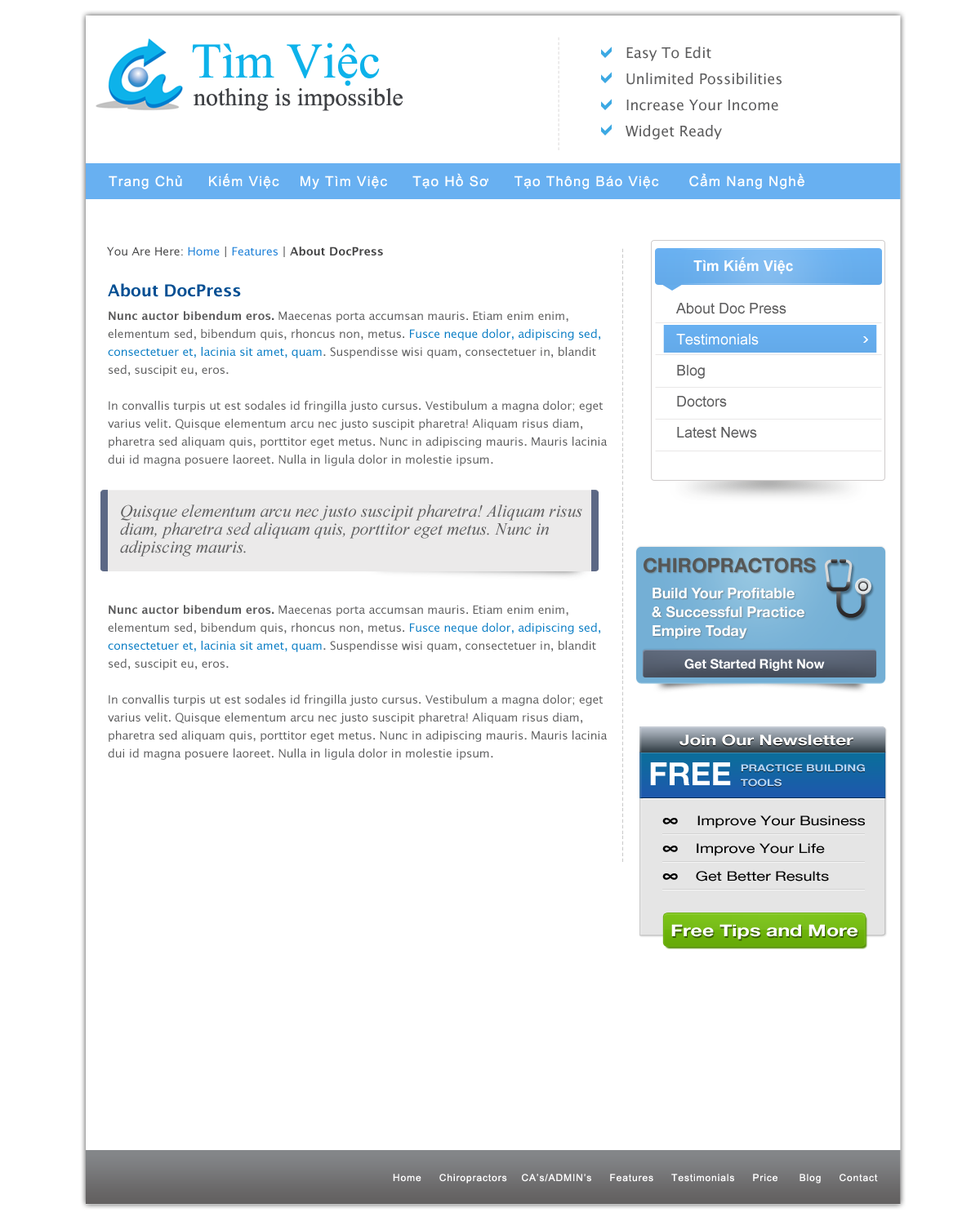
<style>
.page{position:relative;width:980px;height:1217px;background:#ffffff}
.page>*{position:absolute;margin:0}
.t1{font:9.8px "ArialMT";letter-spacing:0.155em;color:#e2e0e0}
.t2{font:49.8px "TimesNewRomanPSMT";color:#0db2ea}
.t3{font:14.7px/26.1px "LucidaGrande";color:#5c5c5d}
.t4{font:24.5px "TimesNewRomanPSMT";color:#3f4145}
.t5{font:13.9px "ArialMT";letter-spacing:0.075em;color:#ffffff}
.t6{font:11.4px "LucidaGrande-Bold";color:#444445}
.t7{font:11.4px "LucidaGrande";color:#444445}
.t8{font:11.4px "LucidaGrande";color:#187dd7}
.t9{font:8.2px "LucidaGrande";letter-spacing:0.1em;color:#b5b5b6}
.t10{font:14.7px "Arial-BoldMT";color:#ffffff}
.t11{font:16.3px "LucidaGrande-Bold";color:#044f93}
.t12{font:14.7px/31px "ArialMT";color:#5c5c5d}
.t13{font:14.7px/31px "ArialMT";color:#ffffff}
.t14{font:11.4px/18px "LucidaGrande";color:#5c5c5d}
.t15{font:11.4px/18px "LucidaGrande-Bold";color:#5c5c5d}
.t16{font:11.4px/18px "LucidaGrande";color:#067bc4}
.t17{font:17.1px/18px "TimesNewRomanPS-ItalicMT";color:#5c5c5d}
.t18{font:19.6px "HelveticaNeue-Bold";color:#565756}
.t19{font:14.7px/18.9px "HelveticaNeue-Bold";color:#ffffff}
.t20{font:13.1px "HelveticaNeue-Bold";color:#ffffff}
.t21{font:14.7px "HelveticaNeue-Bold";color:#ffffff;scale:1.24 1}
.t22{font:31.8px "HelveticaNeue-Bold";color:#ffffff;text-transform:uppercase}
.t23{font:9.8px/14.7px "HelveticaNeue-Bold";color:#b4d5f6;text-transform:uppercase;scale:1.24 1}
.t24{font:13.1px/27.8px "HelveticaNeue";color:#000000;scale:1.24 1}
.t25{font:16.3px/27.8px "HelveticaNeue-Bold";color:#000000;scale:1.24 1}
.t26{font:16.3px "HelveticaNeue-Bold";color:#ffffff;scale:1.24 1}
.t27{font:9.8px "ArialMT";letter-spacing:0.075em;color:#ffffff}
</style>
<div class="page">
<p class="t1" style="left:558px;top:37px;width:1px;height:113px;rotate:90deg">------------------------</p>
<p class="t2" style="left:192px;top:42px;width:188px;height:45px">Tìm Việc</p>
<p class="t3" style="left:625px;top:47px;width:156px;height:93px">Easy To Edit<br>Unlimited Possibilities<br>Increase Your Income<br>Widget Ready</p>
<p class="t4" style="left:193px;top:88px;width:209px;height:23px">nothing is impossible</p>
<p class="t5" style="left:109px;top:173px;width:695px;height:16px">Trang Chủ     Kiếm Việc    My Tìm Việc     Tạo Hồ Sơ     Tạo Thông Báo Việc      Cẩm Nang Nghề</p>
<p class="t6" style="left:107px;top:247px;width:276px;height:10px"><span class="t7">You Are Here:</span><span class="t8"> Home </span><span class="t7">|</span><span class="t8"> Features </span><span class="t7">| </span>About DocPress</p>
<p class="t9" style="left:622px;top:248px;width:1px;height:614px;rotate:90deg">---------------------------------------------------------------------------------------------------------------</p>
<p class="t10" style="left:693px;top:257px;width:100px;height:17px">Tìm Kiếm Việc</p>
<p class="t11" style="left:108px;top:283px;width:133px;height:14px">About DocPress</p>
<p class="t12" style="left:676px;top:303px;width:110px;height:135px">About Doc Press<br><span class="t13">Testimonials<br></span>Blog<br>Doctors <br>Latest News</p>
<p class="t14" style="left:108px;top:311px;width:499px;height:155px"><span class="t15">Nunc auctor bibendum eros. </span>Maecenas porta accumsan mauris. Etiam enim enim, elementum sed, bibendum quis, rhoncus non, metus. <span class="t16">Fusce neque dolor, adipiscing sed, consectetuer et, lacinia sit amet, quam</span>. Suspendisse wisi quam, consectetuer in, blandit sed, suscipit eu, eros. <br><br>In convallis turpis ut est sodales id fringilla justo cursus. Vestibulum a magna dolor; eget varius velit. Quisque elementum arcu nec justo suscipit pharetra! Aliquam risus diam, pharetra sed aliquam quis, porttitor eget metus. Nunc in adipiscing mauris. Mauris lacinia dui id magna posuere laoreet. Nulla in ligula dolor in molestie ipsum.</p>
<p class="t17" style="left:120px;top:505px;width:462px;height:52px">Quisque elementum arcu nec justo suscipit pharetra! Aliquam risus diam, pharetra sed aliquam quis, porttitor eget metus. Nunc in adipiscing mauris.</p>
<p class="t18" style="left:643px;top:558px;width:173px;height:15px">CHIROPRACTORS</p>
<p class="t19" style="left:651px;top:588px;width:153px;height:51px">Build Your Profitable<br>&amp; Successful Practice<br>Empire Today</p>
<p class="t14" style="left:108px;top:605px;width:499px;height:155px"><span class="t15">Nunc auctor bibendum eros. </span>Maecenas porta accumsan mauris. Etiam enim enim, elementum sed, bibendum quis, rhoncus non, metus. <span class="t16">Fusce neque dolor, adipiscing sed, consectetuer et, lacinia sit amet, quam</span>. Suspendisse wisi quam, consectetuer in, blandit sed, suscipit eu, eros. <br><br>In convallis turpis ut est sodales id fringilla justo cursus. Vestibulum a magna dolor; eget varius velit. Quisque elementum arcu nec justo suscipit pharetra! Aliquam risus diam, pharetra sed aliquam quis, porttitor eget metus. Nunc in adipiscing mauris. Mauris lacinia dui id magna posuere laoreet. Nulla in ligula dolor in molestie ipsum.</p>
<p class="t20" style="left:684px;top:659px;width:141px;height:12px">Get Started Right Now</p>
<p class="t21" style="left:679px;top:734px;width:174px;height:12px">Join Our Newsletter</p>
<p class="t22" style="left:650px;top:762px;width:81px;height:23px">Free</p>
<p class="t23" style="left:740px;top:764px;width:125px;height:23px">Practice Building<br>Tools</p>
<p class="t24" style="left:662px;top:816px;width:203px;height:66px"><span class="t25">∞    </span>Improve Your Business<br><span class="t25">∞   </span>Improve Your Life<br><span class="t25">∞   </span>Get Better Results</p>
<p class="t26" style="left:671px;top:924px;width:186px;height:16px">Free Tips and More</p>
<p class="t27" style="left:393px;top:1174px;width:485px;height:10px">Home     Chiropractors    CA’s/ADMIN’s     Features     Testimonials     Price      Blog     Contact</p>
</div>
